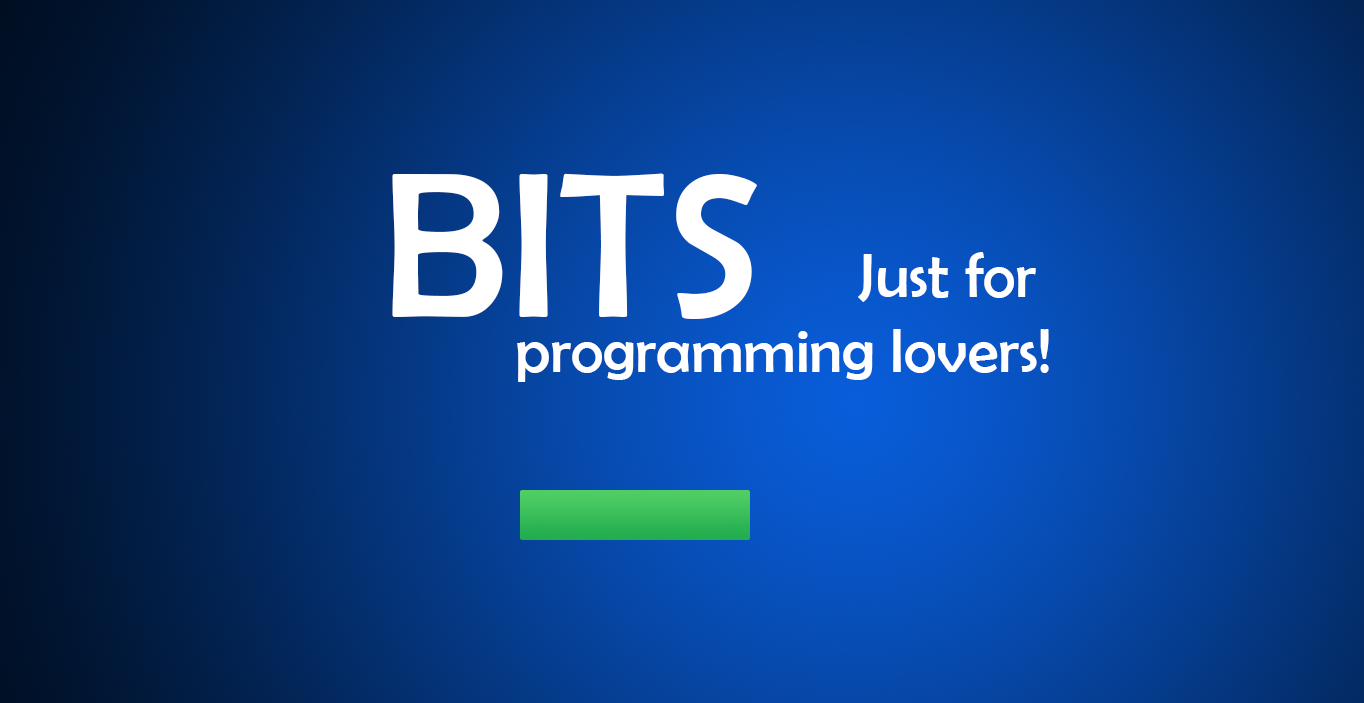
<style>
.page{position:relative;width:1364px;height:703px}
.page>*{position:absolute;margin:0}
.t1{font:208.3px "BerlinSansFB-Reg";color:#ffffff}
.t2{font:62.5px "BerlinSansFB-Reg";color:#ffffff}
</style>
<div class="page">
<p class="t1" style="left:392px;top:173px;width:365px;height:146px">BITS</p>
<p class="t2" style="left:517px;top:252px;width:532px;height:130px;text-align:right">Just for <br>programming lovers!</p>
</div>
